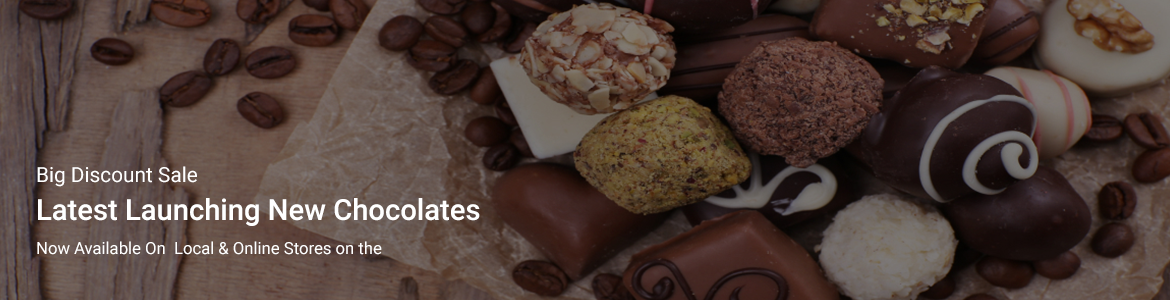
<style>
.page{position:relative;width:1170px;height:300px}
.page>*{position:absolute;margin:0}
.t1{font:20.8px "Roboto-Regular";color:#ffffff}
.t2{font:29.2px "Roboto-Medium";color:#ffffff}
.t3{font:16.7px "Roboto-Regular";color:#ffffff}
</style>
<div class="page">
<p class="t1" style="left:37px;top:166px;width:160px;height:21px">Big Discount Sale</p>
<p class="t2" style="left:38px;top:198px;width:442px;height:28px">Latest Launching New Chocolates</p>
<p class="t3" style="left:37px;top:241px;width:345px;height:14px">Now Available On  Local &amp; Online Stores on the</p>
</div>
